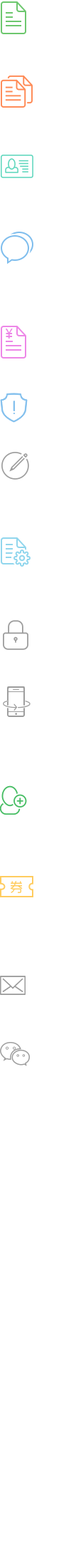
<style>
.page{position:relative;width:71px;height:1568px;background:#ffffff}
.page>*{position:absolute;margin:0}
.t1{font:12.8px "RTWSYueGoTrial-Regular";color:#ffcc5f}
</style>
<div class="page">
<p class="t1" style="left:10px;top:881px;width:13px;height:12px">券</p>
</div>
